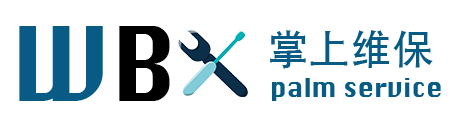
<style>
.page{position:relative;width:455px;height:131px;background:#ffffff}
.page>*{position:absolute;margin:0}
.t1{font:100px "Krungthep";color:#085b84}
.t2{font:100px "Krungthep";color:#000000}
.t3{font:41.7px "STHeiti";color:#085b84}
.t4{font:25px "Krungthep";color:#085b84}
</style>
<div class="page">
<p class="t1" style="left:19px;top:26px;width:151px;height:75px">W<span class="t2">B</span></p>
<p class="t3" style="left:270px;top:30px;width:163px;height:39px">掌上维保</p>
<p class="t4" style="left:272px;top:78px;width:169px;height:23px">palm service</p>
</div>
